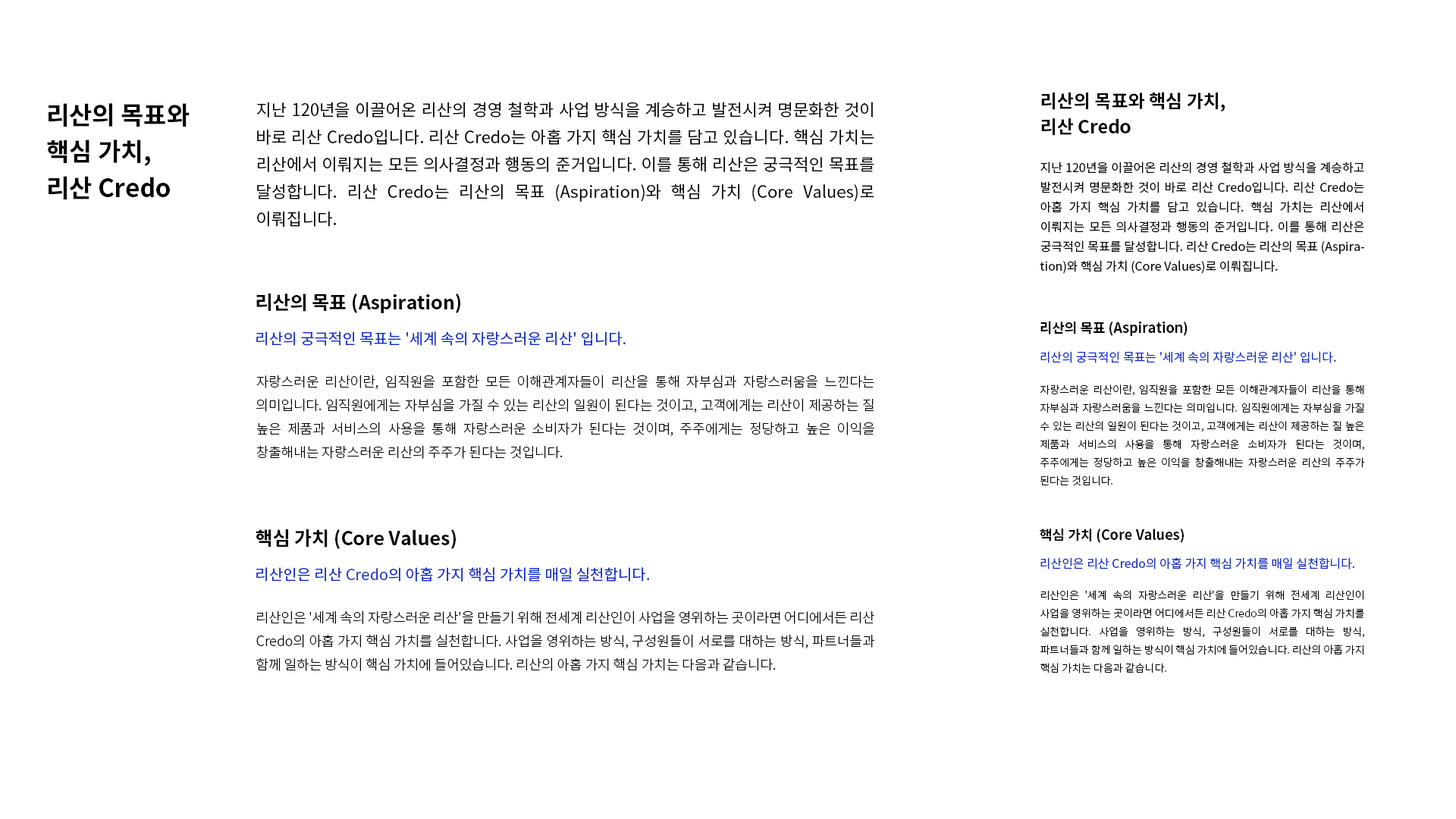
<style>
.page{position:relative;width:1456px;height:819px;background:#ffffff}
.page>*{position:absolute;margin:0}
.t1{font:16.7px/27.3px "NotoSansKR-Regular";color:#000000}
.t2{font:18.2px/25.8px "NotoSansKR-Bold";color:#000000}
.t3{font:25px/36.4px "NotoSansKR-Bold";color:#000000}
.t4{font:12.1px/19.7px "NotoSansKR-Regular";color:#000000}
.t5{font:19px "NotoSansKR-Bold";color:#000000}
.t6{font:13.6px "NotoSansKR-Bold";color:#000000}
.t7{font:15.2px "NotoSansKR-Regular";color:#0e2ac9}
.t8{font:12.1px "NotoSansKR-Regular";color:#0e2ac9}
.t9{font:13.6px/23.5px "NotoSansKR-Light";color:#000000}
.t10{font:10.6px/18.2px "NotoSansKR-Light";color:#000000}
</style>
<div class="page">
<p class="t1" style="left:256px;top:102px;width:618px;height:125px;text-align:justify">지난 120년을 이끌어온 리산의 경영 철학과 사업 방식을 계승하고 발전시켜 명문화한 것이 바로 리산 Credo입니다. 리산 Credo는 아홉 가지 핵심 가치를 담고 있습니다. 핵심 가치는 리산에서 이뤄지는 모든 의사결정과 행동의 준거입니다. 이를 통해 리산은 궁극적인 목표를 달성합니다. 리산 Credo는 리산의 목표 (Aspiration)와 핵심 가치 (Core Values)로 이뤄집니다.</p>
<p class="t2" style="left:1041px;top:92px;width:184px;height:44px;text-align:justify">리산의 목표와 핵심 가치,<br>리산 Credo</p>
<p class="t3" style="left:47px;top:103px;width:143px;height:96px;text-align:justify">리산의 목표와<br>핵심 가치,<br>리산 Credo</p>
<p class="t4" style="left:1040px;top:162px;width:324px;height:112px;text-align:justify">지난 120년을 이끌어온 리산의 경영 철학과 사업 방식을 계승하고 발전시켜 명문화한 것이 바로 리산 Credo입니다. 리산 Credo는 아홉 가지 핵심 가치를 담고 있습니다. 핵심 가치는 리산에서 이뤄지는 모든 의사결정과 행동의 준거입니다. 이를 통해 리산은 궁극적인 목표를 달성합니다. 리산 Credo는 리산의 목표 (Aspiration)와 핵심 가치 (Core Values)로 이뤄집니다.</p>
<p class="t5" style="left:256px;top:293px;width:204px;height:20px">리산의 목표 (Aspiration)</p>
<p class="t6" style="left:1040px;top:321px;width:148px;height:15px">리산의 목표 (Aspiration)</p>
<p class="t7" style="left:256px;top:331px;width:370px;height:15px">리산의 궁극적인 목표는 '세계 속의 자랑스러운 리산' 입니다.</p>
<p class="t8" style="left:1040px;top:351px;width:296px;height:12px">리산의 궁극적인 목표는 '세계 속의 자랑스러운 리산' 입니다.</p>
<p class="t9" style="left:256px;top:375px;width:618px;height:84px;text-align:justify">자랑스러운 리산이란, 임직원을 포함한 모든 이해관계자들이 리산을 통해 자부심과 자랑스러움을 느낀다는 의미입니다. 임직원에게는 자부심을 가질 수 있는 리산의 일원이 된다는 것이고, 고객에게는 리산이 제공하는 질 높은 제품과 서비스의 사용을 통해 자랑스러운 소비자가 된다는 것이며, 주주에게는 정당하고 높은 이익을 창출해내는 자랑스러운 리산의 주주가 된다는 것입니다.</p>
<p class="t10" style="left:1040px;top:384px;width:324px;height:102px;text-align:justify">자랑스러운 리산이란, 임직원을 포함한 모든 이해관계자들이 리산을 통해 자부심과 자랑스러움을 느낀다는 의미입니다. 임직원에게는 자부심을 가질 수 있는 리산의 일원이 된다는 것이고, 고객에게는 리산이 제공하는 질 높은 제품과 서비스의 사용을 통해 자랑스러운 소비자가 된다는 것이며, 주주에게는 정당하고 높은 이익을 창출해내는 자랑스러운 리산의 주주가 된다는 것입니다.</p>
<p class="t5" style="left:256px;top:529px;width:200px;height:20px">핵심 가치 (Core Values)</p>
<p class="t6" style="left:1040px;top:529px;width:144px;height:14px">핵심 가치 (Core Values)</p>
<p class="t8" style="left:1040px;top:557px;width:314px;height:13px">리산인은 리산 Credo의 아홉 가지 핵심 가치를 매일 실천합니다.</p>
<p class="t7" style="left:256px;top:567px;width:393px;height:15px">리산인은 리산 Credo의 아홉 가지 핵심 가치를 매일 실천합니다.</p>
<p class="t10" style="left:1040px;top:590px;width:324px;height:83px;text-align:justify">리산인은 '세계 속의 자랑스러운 리산'을 만들기 위해 전세계 리산인이 사업을 영위하는 곳이라면 어디에서든 리산 Credo의 아홉 가지 핵심 가치를 실천합니다. 사업을 영위하는 방식, 구성원들이 서로를 대하는 방식, 파트너들과 함께 일하는 방식이 핵심 가치에 들어있습니다. 리산의 아홉 가지 핵심 가치는 다음과 같습니다.</p>
<p class="t9" style="left:256px;top:610px;width:618px;height:61px;text-align:justify">리산인은 '세계 속의 자랑스러운 리산'을 만들기 위해 전세계 리산인이 사업을 영위하는 곳이라면 어디에서든 리산 Credo의 아홉 가지 핵심 가치를 실천합니다. 사업을 영위하는 방식, 구성원들이 서로를 대하는 방식, 파트너들과 함께 일하는 방식이 핵심 가치에 들어있습니다. 리산의 아홉 가지 핵심 가치는 다음과 같습니다.</p>
</div>
